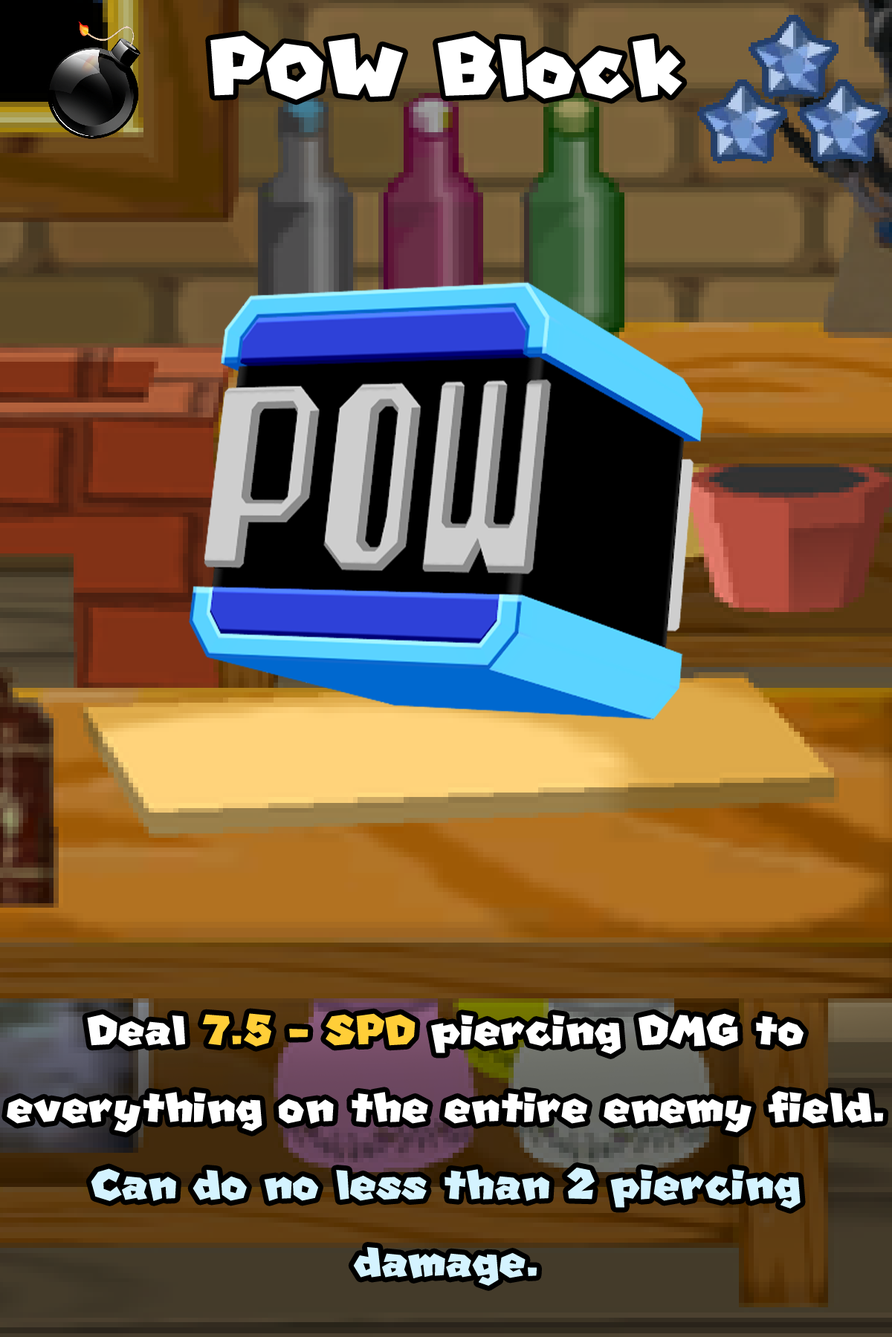
<style>
.page{position:relative;width:892px;height:1337px}
.page>*{position:absolute;margin:0}
.t1{font:191px "SuperMario";color:#ffffff}
.t2{font:98.1px/77.3px "SuperMario";color:#ffffff}
.t3{font:98.1px/77.3px "SuperMario";color:#ffce38}
.t4{font:98.1px/77.3px "SuperMario";color:#d4f3ff}
</style>
<div class="page">
<p class="t1" style="left:210px;top:36px;width:472px;height:64px">POW Block</p>
<p class="t2" style="left:7px;top:1013px;width:876px;height:273px;text-align:center">Deal <span class="t3">7.5 - SPD</span> piercing DMG to everything on the entire enemy field. <br><span class="t4">Can do no less than 2 piercing damage.</span></p>
</div>
